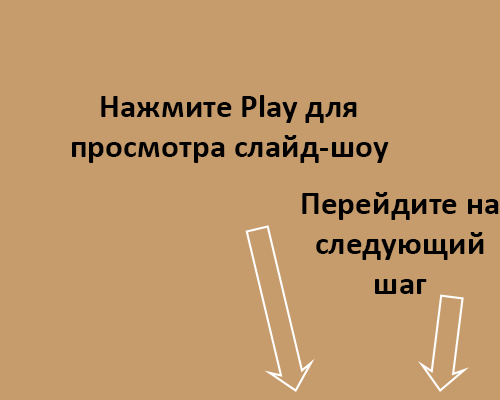
<style>
.page{position:relative;width:500px;height:400px;background:#c69c6d}
.page>*{position:absolute;margin:0}
.t1{font:33.3px "Calibri-Bold";color:#000000}
</style>
<div class="page">
<p class="t1" style="left:72px;top:95px;width:317px;height:68px;text-align:center">Нажмите Play для просмотра слайд-шоу</p>
<p class="t1" style="left:302px;top:192px;width:197px;height:102px;text-align:center">Перейдите на следующий шаг</p>
</div>
